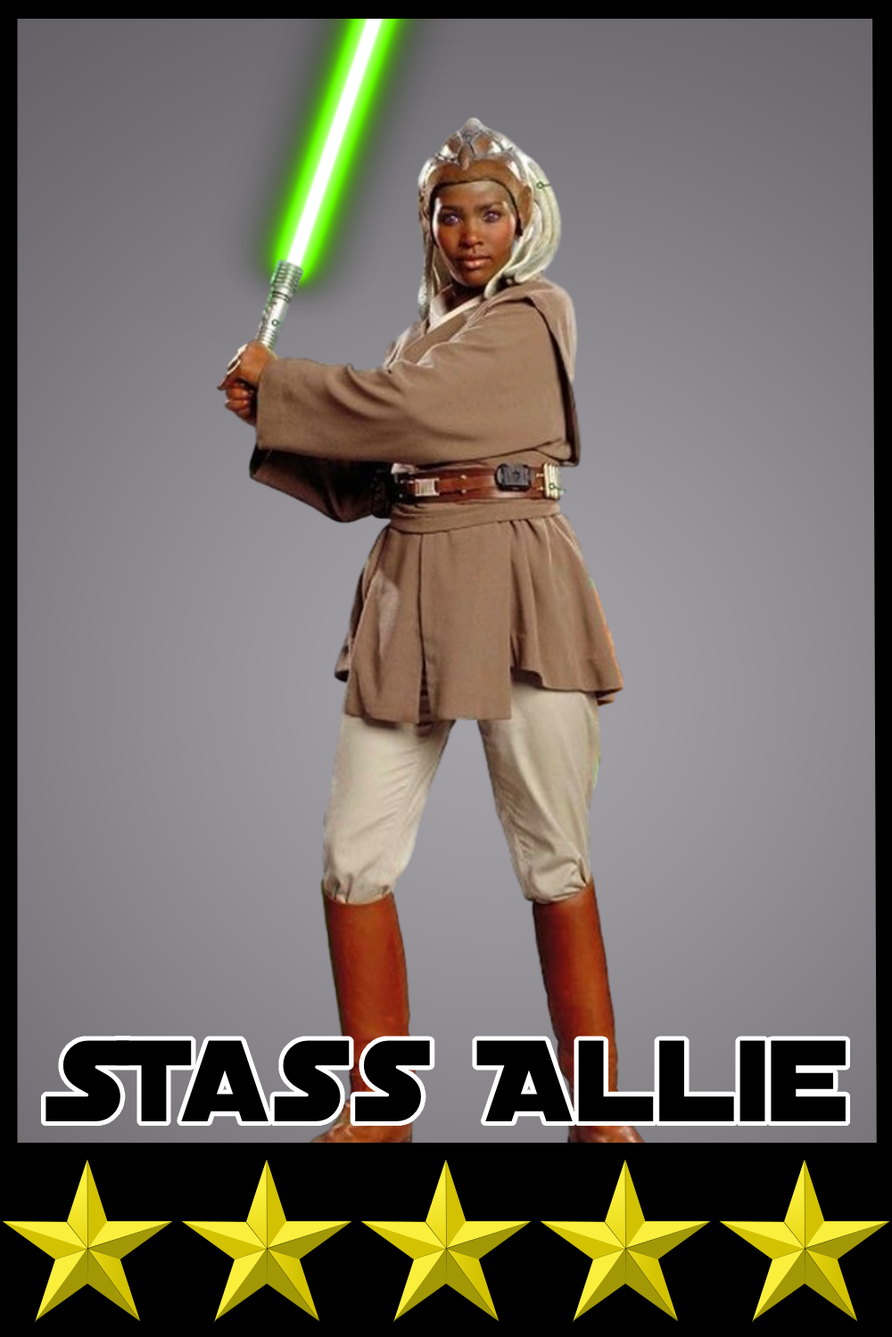
<style>
.page{position:relative;width:892px;height:1337px}
.page>*{position:absolute;margin:0}
.t1{font:124.1px "DistantGalaxy";color:#000000}
</style>
<div class="page">
<p class="t1" style="left:45px;top:1041px;width:800px;height:81px">Stass Allie</p>
</div>
